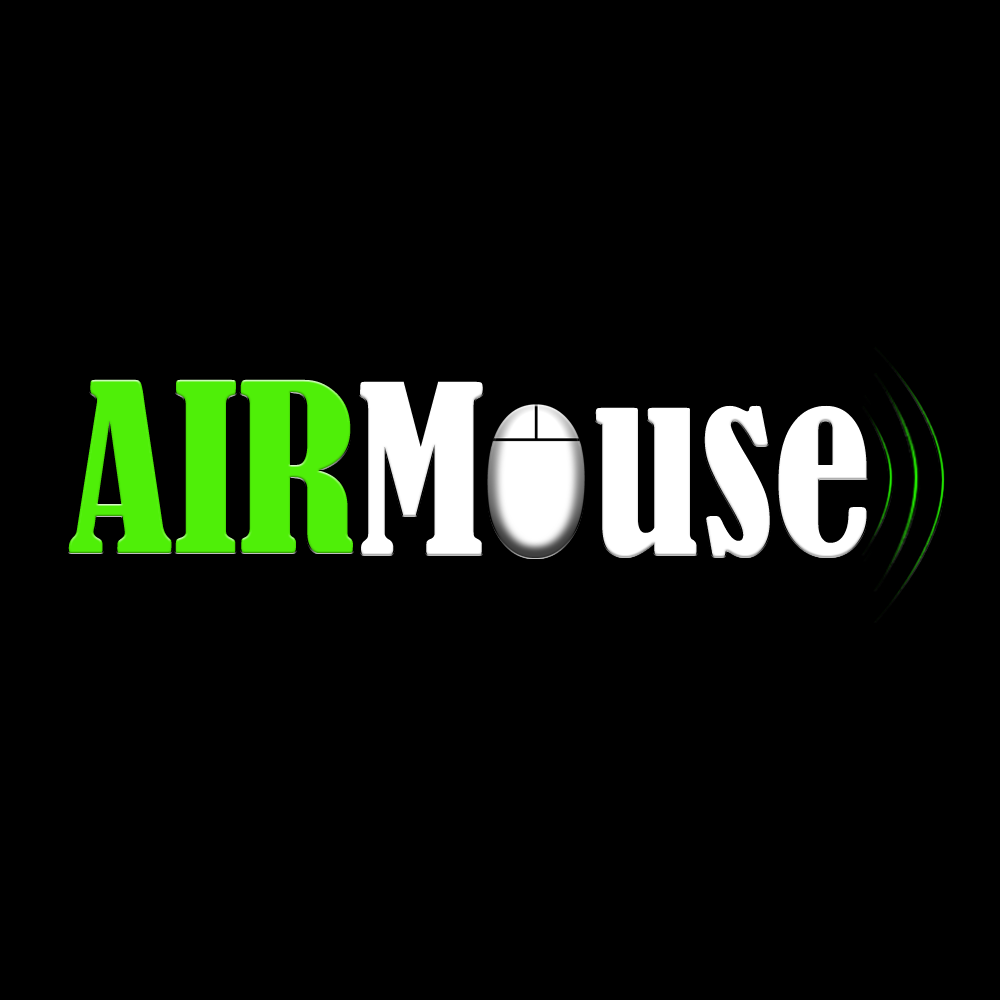
<style>
.page{position:relative;width:1000px;height:1000px;background:#000000}
.page>*{position:absolute;margin:0}
.t1{font:220px "BernardMT-Condensed";color:#4fef08}
.t2{font:220px "BernardMT-Condensed";color:#ffffff}
</style>
<div class="page">
<p class="t1" style="left:68px;top:379px;width:285px;height:174px">AIR</p>
<p class="t2" style="left:360px;top:381px;width:507px;height:176px">M  use</p>
</div>
